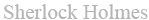
<style>
.page{position:relative;width:149px;height:20px;background:#ffffff}
.page>*{position:absolute;margin:0}
.t1{font:21px "TimesNewRomanPSMT";color:#b5b5b5}
</style>
<div class="page">
<p class="t1" style="left:4px;top:4px;width:144px;height:15px">Sherlock Holmes</p>
</div>
